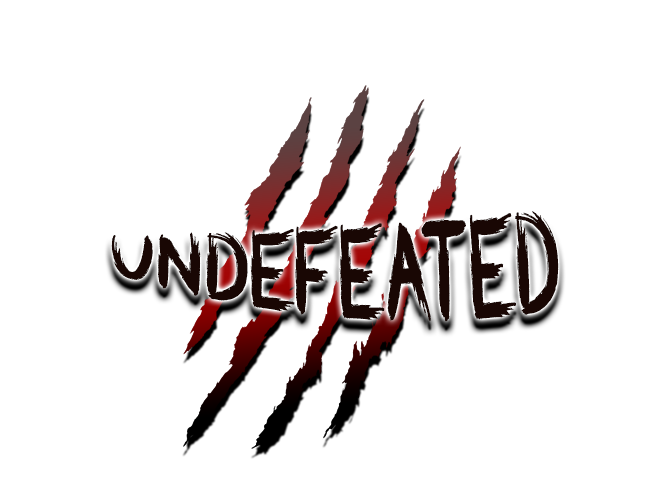
<style>
.page{position:relative;width:645px;height:500px;background:#ffffff}
.page>*{position:absolute;margin:0}
.t1{font:93.9px "WARBRUSH";color:#190704}
</style>
<div class="page">
<p class="t1" style="left:111px;top:211px;width:448px;height:111px">UNDEFEATED</p>
</div>
